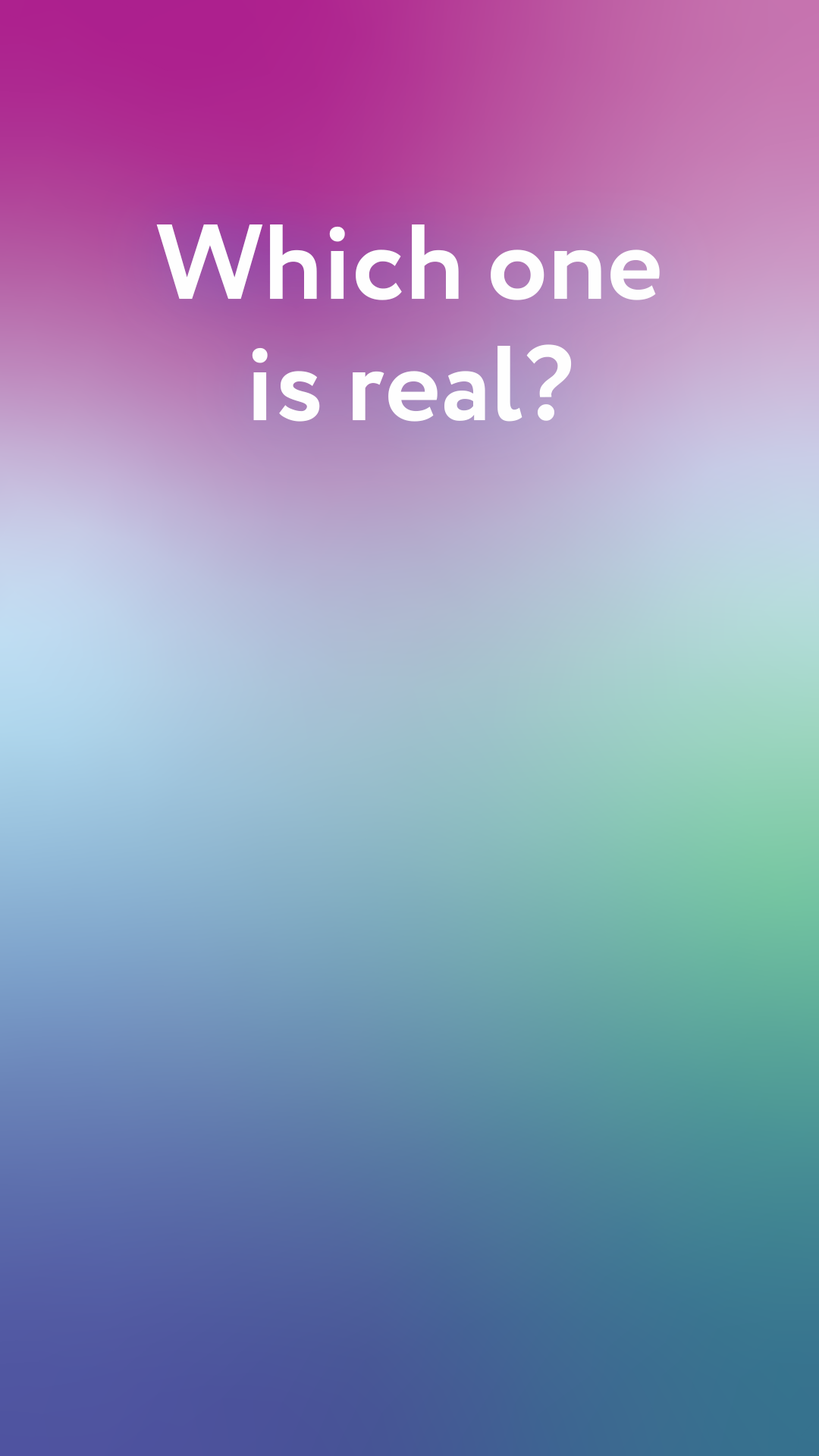
<style>
.page{position:relative;width:819px;height:1456px}
.page>*{position:absolute;margin:0}
.t1{font:106.2px/121.3px "Circe-Bold";color:#fefefe}
</style>
<div class="page">
<p class="t1" style="left:156px;top:224px;width:504px;height:198px;text-align:center">Which one<br>is real?</p>
</div>
